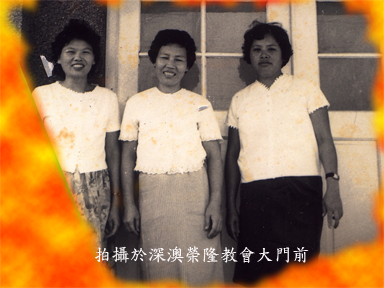
<style>
.page{position:relative;width:384px;height:288px}
.page>*{position:absolute;margin:0}
.t1{font:18px "DFKaiShu-SB-Estd-BF";color:#faf7f8}
</style>
<div class="page">
<p class="t1" style="left:95px;top:246px;width:214px;height:17px">拍攝於深澳榮隆教會大門前</p>
</div>
